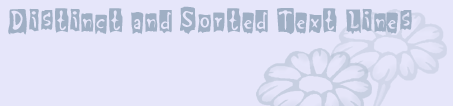
<style>
.page{position:relative;width:453px;height:106px;background:#e6e6fa}
.page>*{position:absolute;margin:0}
.t1{font:32px "BeatMyGuest";color:#9fafc4}
</style>
<div class="page">
<p class="t1" style="left:8px;top:6px;width:404px;height:29px">Distinct and Sorted Text Lines</p>
</div>
